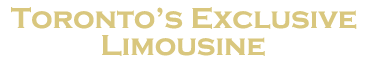
<style>
.page{position:relative;width:365px;height:70px;background:#ffffff}
.page>*{position:absolute;margin:0}
.t1{font:30px "CopperplateGothic-Bold";color:#d9c77e}
</style>
<div class="page">
<p class="t1" style="left:11px;top:7px;width:346px;height:22px">Toronto’s Exclusive</p>
<p class="t1" style="left:102px;top:35px;width:163px;height:21px">Limousine</p>
</div>
